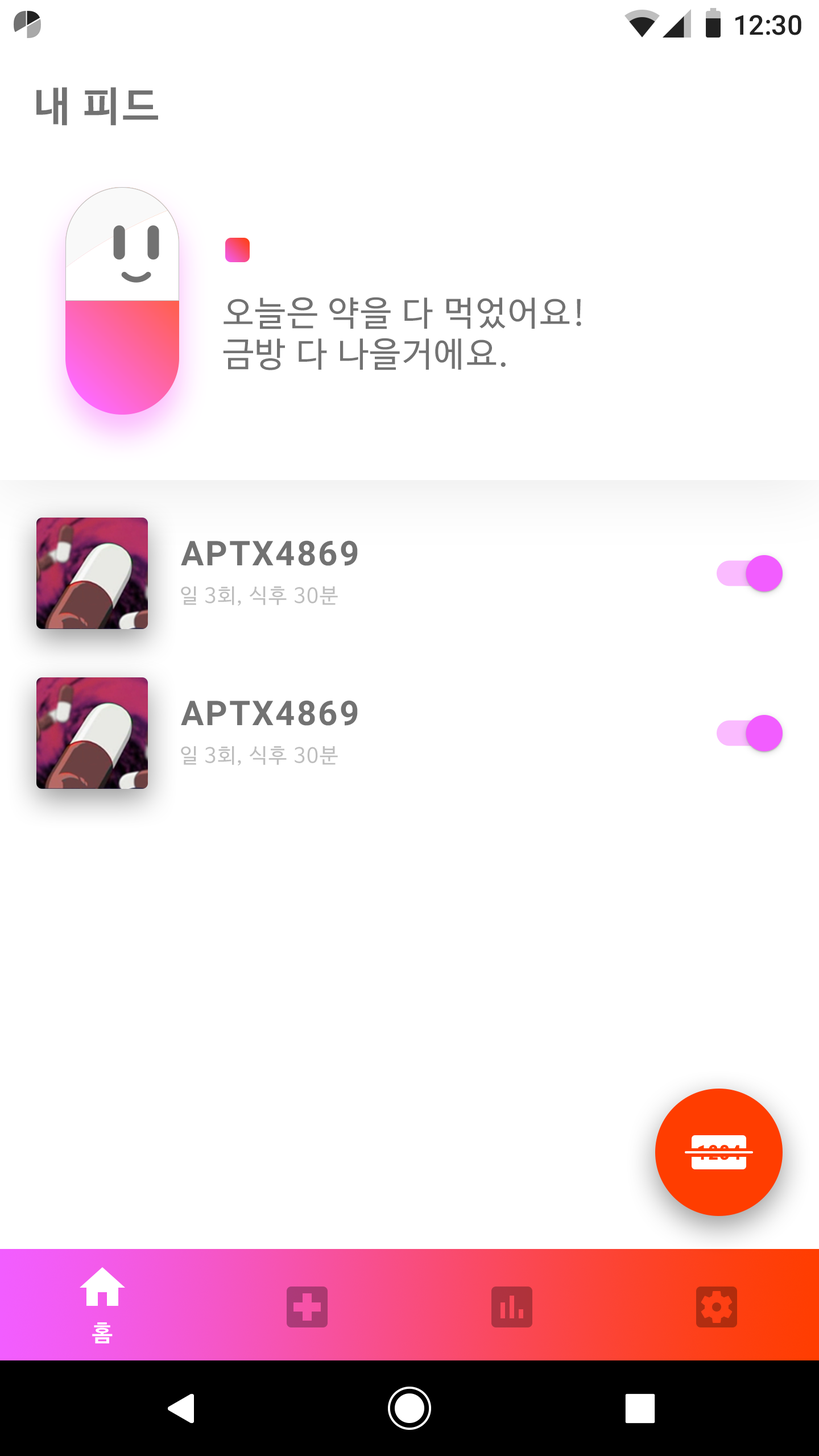
<style>
.page{position:relative;width:819px;height:1456px;background:#ffffff}
.page>*{position:absolute;margin:0}
.t1{font:27.3px "Roboto-Medium";color:#212121}
.t2{font:40.9px "NanumBarunGothicBold";letter-spacing:0.05em;color:#727272}
.t3{font:34.1px/40.9px "NanumBarunGothic";letter-spacing:0.05em;color:#727272}
.t4{font:34.1px "Roboto-Bold";letter-spacing:0.05em;color:#727272}
.t5{font:20.5px "NanumBarunGothic";letter-spacing:0.05em;color:#bdbdbd}
.t6{font:22.7px "NanumBarunGothicBold";letter-spacing:0.05em;color:#ffffff}
</style>
<div class="page">
<p class="t1" style="left:735px;top:15px;width:66px;height:20px">12:30</p>
<p class="t2" style="left:36px;top:87px;width:122px;height:39px">내 피드</p>
<p class="t3" style="left:223px;top:297px;width:358px;height:73px">오늘은 약을 다 먹었어요!<br>금방 다 나을거에요.</p>
<p class="t4" style="left:181px;top:540px;width:177px;height:26px">APTX4869</p>
<p class="t5" style="left:181px;top:586px;width:157px;height:20px">일 3회, 식후 30분</p>
<p class="t4" style="left:181px;top:700px;width:177px;height:26px">APTX4869</p>
<p class="t5" style="left:181px;top:746px;width:157px;height:20px">일 3회, 식후 30분</p>
<p class="t6" style="left:92px;top:1322px;width:21px;height:21px">홈</p>
</div>
